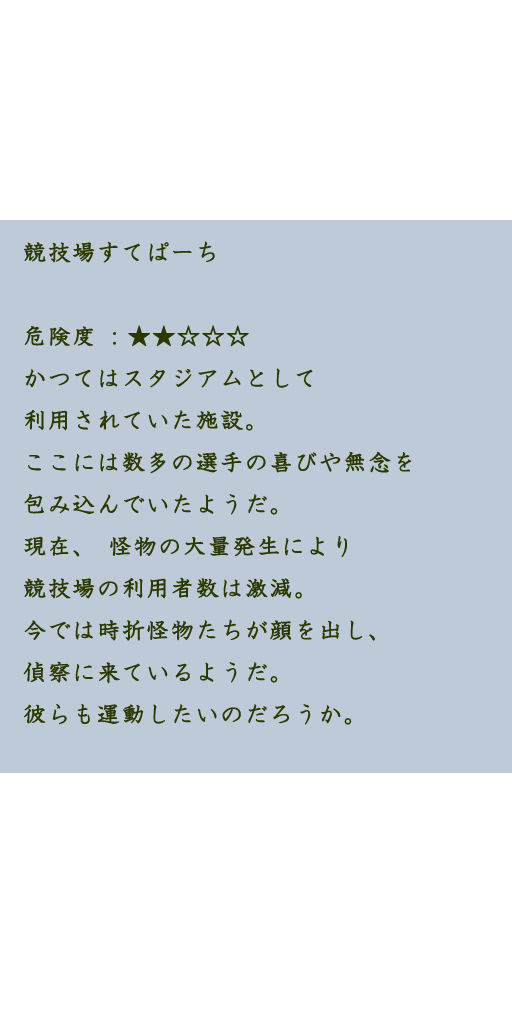
<style>
.page{position:relative;width:512px;height:1024px;background:#bfcad8}
.page>*{position:absolute;margin:0}
.t1{font:24px "HGSKyokashotai";color:#2b3800;font-weight:bold}
</style>
<div class="page">
<p class="t1" style="left:23px;top:241px;width:389px;height:484px">競技場すてぱーち<br><br>危険度：★★☆☆☆<br>かつてはスタジアムとして<br>利用されていた施設。<br>ここには数多の選手の喜びや無念を<br>包み込んでいたようだ。<br>現在、怪物の大量発生により<br>競技場の利用者数は激減。<br>今では時折怪物たちが顔を出し、<br>偵察に来ているようだ。<br>彼らも運動したいのだろうか。</p>
</div>
